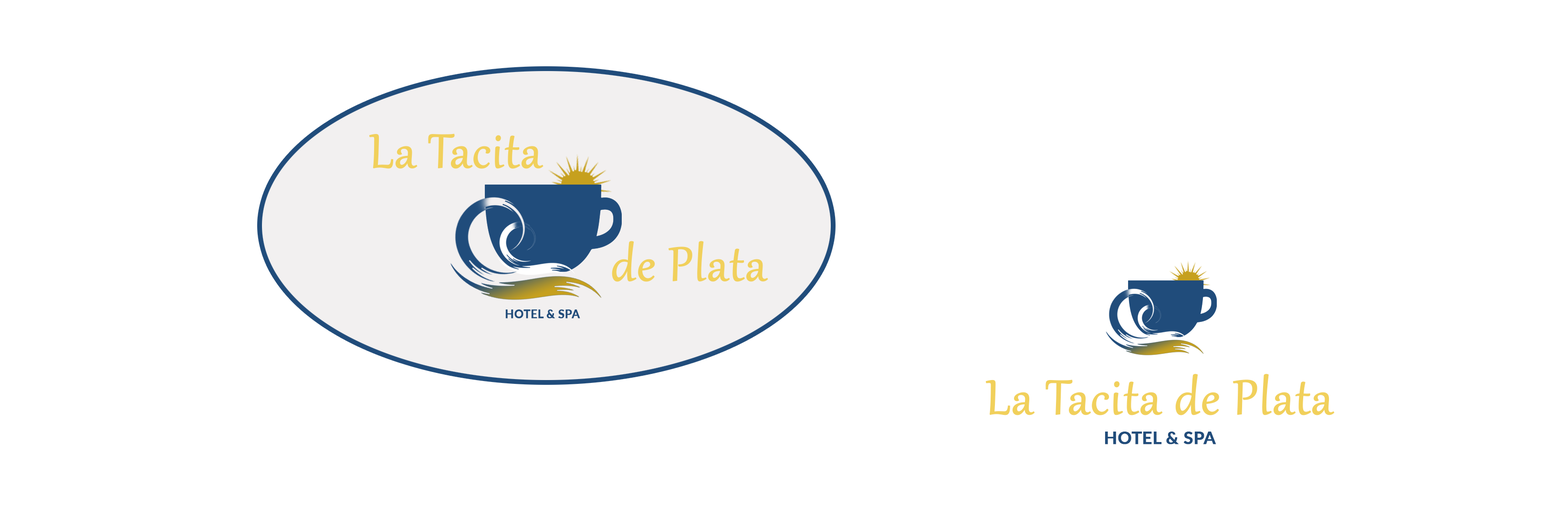
<style>
.page{position:relative;width:1568px;height:515px;background:#ffffff}
.page>*{position:absolute;margin:0}
.t1{font:58.5px "Gabriola";color:#f1d05b;font-weight:bold}
.t2{font:11.5px "Lato-Bold";color:#204c7b;text-transform:uppercase;font-weight:bold}
.t3{font:59.5px "Gabriola";color:#f1d05b;font-weight:bold}
.t4{font:17.2px "Lato-Bold";color:#204c7b;text-transform:uppercase;font-weight:bold}
</style>
<div class="page">
<p class="t1" style="left:369px;top:134px;width:175px;height:35px">La Tacita</p>
<p class="t1" style="left:612px;top:241px;width:156px;height:41px">de Plata</p>
<p class="t2" style="left:505px;top:310px;width:75px;height:9px">Hotel &amp; Spa</p>
<p class="t3" style="left:985px;top:374px;width:350px;height:42px">La Tacita de Plata</p>
<p class="t4" style="left:1105px;top:432px;width:111px;height:13px">Hotel &amp; Spa</p>
</div>
